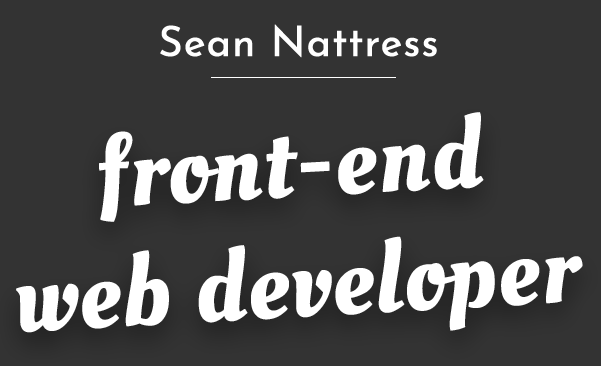
<style>
.page{position:relative;width:601px;height:366px;background:#333333}
.page>*{position:absolute;margin:0}
.t1{font:41.7px "JosefinSans-Regular";color:#ffffff;font-weight:bold}
.t2{font:100px "OleoScript-Regular";color:#ffffff;font-weight:bold}
</style>
<div class="page">
<p class="t1" style="left:160px;top:24px;width:277px;height:34px">Sean Nattress</p>
<p class="t2" style="left:16px;top:112px;width:567px;height:221px;text-align:center;rotate:-3deg">front-end<br>web developer</p>
</div>
